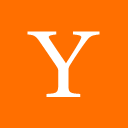
<style>
.page{position:relative;width:128px;height:128px;background:#ff6f00}
.page>*{position:absolute;margin:0}
.t1{font:100.4px "MinionPro-Regular";letter-spacing:0.01em;color:#ffffff;scale:1.18 1}
</style>
<div class="page">
<p class="t1" style="left:27px;top:31px;width:73px;height:66px">Y</p>
</div>
